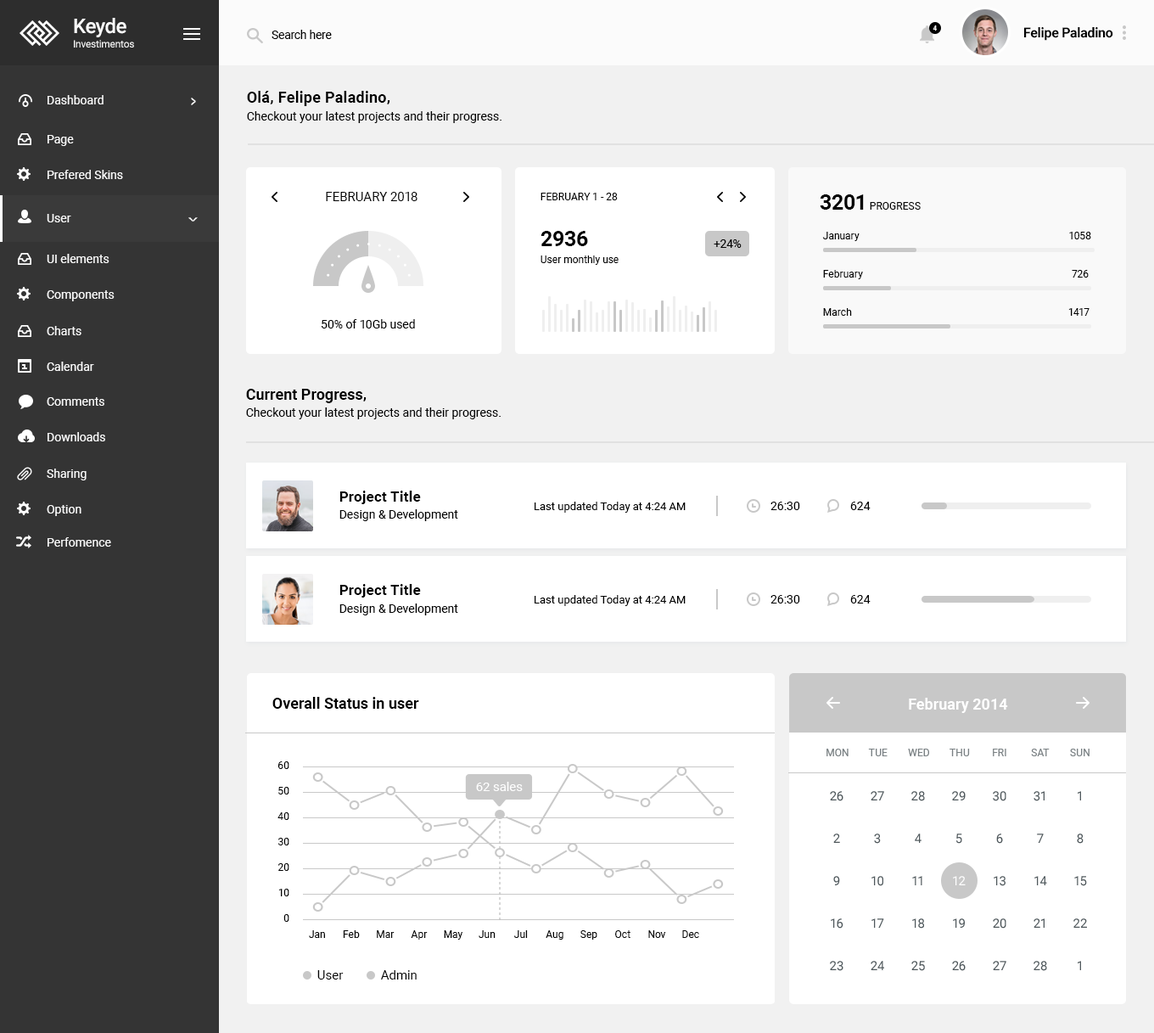
<style>
.page{position:relative;width:1154px;height:1033px;background:#ffffff}
.page>*{position:absolute;margin:0}
.t1{font:20.4px "Roboto-Medium";letter-spacing:-0.02em;color:#fbfbfb}
.t2{font:11.9px "Roboto-Regular";letter-spacing:-0.02em;color:#000000}
.t3{font:7.1px "Roboto-Regular";color:#fbfbfb;scale:0.9 1}
.t4{font:13.6px "Roboto-Bold";letter-spacing:-0.02em;color:#000000}
.t5{font:10.2px "Roboto-Regular";letter-spacing:-0.02em;color:#fbfbfb}
.t6{font:11.9px "Roboto-Regular";color:#f9f9f9}
.t7{font:17.5px "Roboto-Regular";color:#f9f9f9;scale:0.52 1}
.t8{font:15.3px "Roboto-Bold";letter-spacing:0.015em;color:#000000}
.t9{font:11.9px "Roboto-Regular";color:#000000}
.t10{font:12.7px "Roboto-Regular";color:#000000;text-transform:uppercase}
.t11{font:10.2px "Roboto-Regular";color:#000000;text-transform:uppercase}
.t12{font:21.2px "Roboto-Bold";color:#000000}
.t13{font:19.6px "Roboto-Regular";color:#f9f9f9;scale:0.42 1}
.t14{font:10.2px "Roboto-Regular";color:#000000}
.t15{font:15.3px "Roboto-Bold";color:#000000}
.t16{font:14.4px "Roboto-Bold";letter-spacing:0.015em;color:#000000}
.t17{font:11px "Roboto-Regular";color:#000000}
.t18{font:15.3px "Roboto-Bold";color:#ffffff}
.t19{font:10.2px "Roboto-Regular";color:#7a8184;text-transform:uppercase}
.t20{font:10.2px/25.5px "Roboto-Regular";color:#000000}
.t21{font:11.9px "Roboto-Regular";color:#ffffff;scale:1.07 1}
.t22{font:12.7px "Roboto-Regular";color:#4e575b}
.t23{font:12.7px "Roboto-Regular";color:#ffffff}
.t24{font:12.7px "Roboto-Regular";color:#000000}
</style>
<div class="page">
<p class="t1" style="left:74px;top:18px;width:52px;height:19px">Keyde</p>
<p class="t2" style="left:272px;top:30px;width:60px;height:9px">Search here</p>
<p class="t3" style="left:933px;top:25px;width:4px;height:6px">4</p>
<p class="t4" style="left:1024px;top:27px;width:90px;height:14px">Felipe Paladino</p>
<p class="t5" style="left:74px;top:40px;width:60px;height:8px">Investimentos</p>
<p class="t6" style="left:48px;top:95px;width:56px;height:9px">Dashboard</p>
<p class="t7" style="left:191px;top:98px;width:5px;height:7px">&gt;</p>
<p class="t8" style="left:247px;top:91px;width:143px;height:15px">Olá, Felipe Paladino,</p>
<p class="t9" style="left:247px;top:111px;width:255px;height:12px">Checkout your latest projects and their progress.</p>
<p class="t6" style="left:48px;top:135px;width:26px;height:11px">Page</p>
<p class="t6" style="left:48px;top:170px;width:75px;height:9px">Prefered Skins</p>
<p class="t10" style="left:326px;top:192px;width:92px;height:9px">February 2018</p>
<p class="t11" style="left:541px;top:193px;width:77px;height:7px">February 1 - 28</p>
<p class="t12" style="left:820px;top:194px;width:44px;height:16px">3201</p>
<p class="t11" style="left:870px;top:202px;width:51px;height:8px">PROGRESS</p>
<p class="t6" style="left:47px;top:214px;width:24px;height:8px">User</p>
<p class="t13" style="left:188px;top:217px;width:10px;height:5px;rotate:90deg">&gt;</p>
<p class="t12" style="left:541px;top:231px;width:47px;height:15px">2936</p>
<p class="t14" style="left:822px;top:232px;width:38px;height:9px">January</p>
<p class="t14" style="left:1069px;top:232px;width:23px;height:7px">1058</p>
<p class="t9" style="left:714px;top:239px;width:28px;height:9px">+24%</p>
<p class="t6" style="left:47px;top:254px;width:62px;height:9px">UI elements</p>
<p class="t14" style="left:541px;top:255px;width:78px;height:10px">User monthly use</p>
<p class="t14" style="left:823px;top:270px;width:40px;height:9px">February</p>
<p class="t14" style="left:1072px;top:270px;width:17px;height:8px">726</p>
<p class="t6" style="left:47px;top:290px;width:68px;height:11px">Components</p>
<p class="t14" style="left:823px;top:308px;width:29px;height:8px">March</p>
<p class="t14" style="left:1069px;top:308px;width:21px;height:8px">1417</p>
<p class="t6" style="left:47px;top:326px;width:34px;height:9px">Charts</p>
<p class="t9" style="left:321px;top:319px;width:94px;height:9px">50% of 10Gb used</p>
<p class="t6" style="left:47px;top:362px;width:47px;height:9px">Calendar</p>
<p class="t15" style="left:246px;top:389px;width:121px;height:14px">Current Progress,</p>
<p class="t6" style="left:47px;top:397px;width:57px;height:9px">Comments</p>
<p class="t9" style="left:246px;top:407px;width:255px;height:12px">Checkout your latest projects and their progress.</p>
<p class="t6" style="left:48px;top:432px;width:57px;height:9px">Downloads</p>
<p class="t6" style="left:47px;top:469px;width:40px;height:11px">Sharing</p>
<p class="t16" style="left:340px;top:491px;width:81px;height:13px">Project Title</p>
<p class="t6" style="left:47px;top:505px;width:34px;height:11px">Option</p>
<p class="t9" style="left:340px;top:509px;width:118px;height:12px">Design &amp; Development</p>
<p class="t17" style="left:535px;top:502px;width:151px;height:11px">Last updated Today at 4:24 AM</p>
<p class="t9" style="left:771px;top:502px;width:29px;height:8px">26:30</p>
<p class="t9" style="left:850px;top:502px;width:21px;height:8px">624</p>
<p class="t6" style="left:48px;top:537px;width:63px;height:10px">Perfomence</p>
<p class="t16" style="left:340px;top:584px;width:81px;height:14px">Project Title</p>
<p class="t9" style="left:340px;top:603px;width:118px;height:12px">Design &amp; Development</p>
<p class="t17" style="left:535px;top:595px;width:151px;height:11px">Last updated Today at 4:24 AM</p>
<p class="t9" style="left:771px;top:595px;width:29px;height:8px">26:30</p>
<p class="t9" style="left:850px;top:595px;width:21px;height:8px">624</p>
<p class="t15" style="left:272px;top:697px;width:147px;height:12px">Overall Status in user</p>
<p class="t18" style="left:909px;top:698px;width:99px;height:15px">February 2014</p>
<p class="t19" style="left:827px;top:749px;width:22px;height:7px">Mon</p>
<p class="t19" style="left:868px;top:749px;width:20px;height:7px">Tue</p>
<p class="t19" style="left:908px;top:749px;width:21px;height:7px">Wed</p>
<p class="t19" style="left:950px;top:749px;width:20px;height:7px">Thu</p>
<p class="t19" style="left:993px;top:749px;width:14px;height:7px">Fri</p>
<p class="t19" style="left:1031px;top:749px;width:19px;height:7px">Sat</p>
<p class="t19" style="left:1070px;top:749px;width:20px;height:7px">Sun</p>
<p class="t20" style="left:278px;top:761px;width:11px;height:161px;text-align:right">60<br>50<br>40<br>30<br>20<br>10<br>0</p>
<p class="t21" style="left:476px;top:782px;width:47px;height:9px">62 sales</p>
<p class="t22" style="left:830px;top:791px;width:14px;height:10px">26</p>
<p class="t22" style="left:871px;top:791px;width:13px;height:9px">27</p>
<p class="t22" style="left:912px;top:791px;width:13px;height:10px">28</p>
<p class="t22" style="left:952px;top:791px;width:14px;height:9px">29</p>
<p class="t22" style="left:993px;top:791px;width:14px;height:10px">30</p>
<p class="t22" style="left:1034px;top:791px;width:11px;height:10px">31</p>
<p class="t22" style="left:1078px;top:791px;width:3px;height:9px">1</p>
<p class="t22" style="left:834px;top:834px;width:6px;height:9px">2</p>
<p class="t22" style="left:874px;top:834px;width:7px;height:10px">3</p>
<p class="t22" style="left:915px;top:834px;width:7px;height:9px">4</p>
<p class="t22" style="left:957px;top:834px;width:6px;height:10px">5</p>
<p class="t22" style="left:996px;top:834px;width:7px;height:10px">6</p>
<p class="t22" style="left:1037px;top:834px;width:7px;height:9px">7</p>
<p class="t22" style="left:1077px;top:834px;width:7px;height:10px">8</p>
<p class="t22" style="left:834px;top:876px;width:6px;height:9px">9</p>
<p class="t22" style="left:872px;top:876px;width:12px;height:10px">10</p>
<p class="t22" style="left:912px;top:876px;width:11px;height:9px">11</p>
<p class="t23" style="left:953px;top:876px;width:13px;height:9px">12</p>
<p class="t22" style="left:994px;top:876px;width:12px;height:10px">13</p>
<p class="t22" style="left:1035px;top:876px;width:12px;height:9px">14</p>
<p class="t22" style="left:1075px;top:876px;width:12px;height:10px">15</p>
<p class="t22" style="left:831px;top:918px;width:13px;height:11px">16</p>
<p class="t22" style="left:872px;top:918px;width:12px;height:10px">17</p>
<p class="t22" style="left:912px;top:918px;width:12px;height:11px">18</p>
<p class="t22" style="left:953px;top:918px;width:12px;height:10px">19</p>
<p class="t22" style="left:993px;top:918px;width:14px;height:11px">20</p>
<p class="t22" style="left:1034px;top:918px;width:11px;height:10px">21</p>
<p class="t22" style="left:1074px;top:918px;width:13px;height:10px">22</p>
<p class="t14" style="left:309px;top:930px;width:16px;height:8px">Jan</p>
<p class="t14" style="left:343px;top:930px;width:17px;height:8px">Feb</p>
<p class="t14" style="left:377px;top:930px;width:18px;height:8px">Mar</p>
<p class="t14" style="left:411px;top:930px;width:17px;height:10px">Apr</p>
<p class="t14" style="left:444px;top:930px;width:19px;height:10px">May</p>
<p class="t14" style="left:479px;top:930px;width:17px;height:8px">Jun</p>
<p class="t14" style="left:514px;top:930px;width:14px;height:8px">Jul</p>
<p class="t14" style="left:546px;top:930px;width:18px;height:10px">Aug</p>
<p class="t14" style="left:581px;top:930px;width:17px;height:10px">Sep</p>
<p class="t14" style="left:615px;top:930px;width:16px;height:8px">Oct</p>
<p class="t14" style="left:648px;top:930px;width:18px;height:8px">Nov</p>
<p class="t14" style="left:682px;top:930px;width:17px;height:8px">Dec</p>
<p class="t22" style="left:830px;top:961px;width:14px;height:10px">23</p>
<p class="t22" style="left:871px;top:961px;width:13px;height:9px">24</p>
<p class="t22" style="left:912px;top:961px;width:13px;height:10px">25</p>
<p class="t22" style="left:952px;top:961px;width:14px;height:10px">26</p>
<p class="t22" style="left:993px;top:961px;width:14px;height:9px">27</p>
<p class="t22" style="left:1034px;top:961px;width:13px;height:10px">28</p>
<p class="t22" style="left:1078px;top:961px;width:3px;height:9px">1</p>
<p class="t24" style="left:317px;top:970px;width:27px;height:10px">User</p>
<p class="t24" style="left:381px;top:970px;width:36px;height:10px">Admin</p>
</div>
